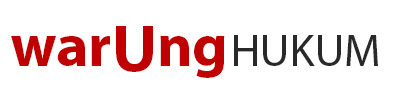
<style>
.page{position:relative;width:400px;height:100px;background:#ffffff}
.page>*{position:absolute;margin:0}
.t1{font:45.7px "MyriadPro-Regular";color:#292929}
.t2{font:61px "MyriadPro-Bold";color:#c00000}
.t3{font:66px "MyriadPro-Bold";color:#c00000}
.t4{font:61px "MyriadPro-Bold";letter-spacing:0.04em;color:#c00000}
</style>
<div class="page">
<p class="t1" style="left:11px;top:26px;width:367px;height:52px"><span class="t2">war</span><span class="t3">U</span><span class="t2">n</span><span class="t4">g</span>HUKUM</p>
</div>
